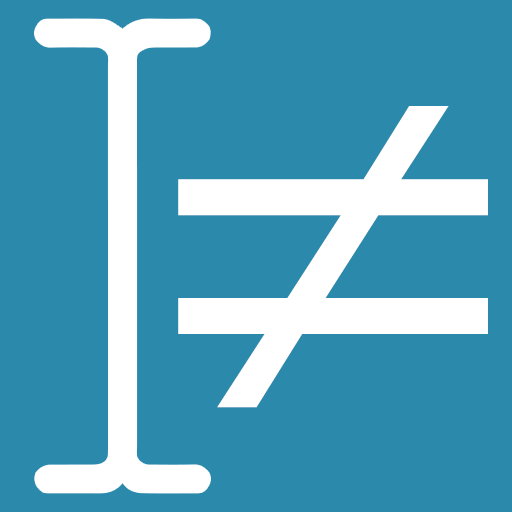
<style>
.page{position:relative;width:512px;height:512px;background:#2b89ac}
.page>*{position:absolute;margin:0}
.t1{font:600px "MyriadPro-Regular";color:#ffffff}
</style>
<div class="page">
<p class="t1" style="left:178px;top:106px;width:310px;height:302px">≠</p>
</div>
